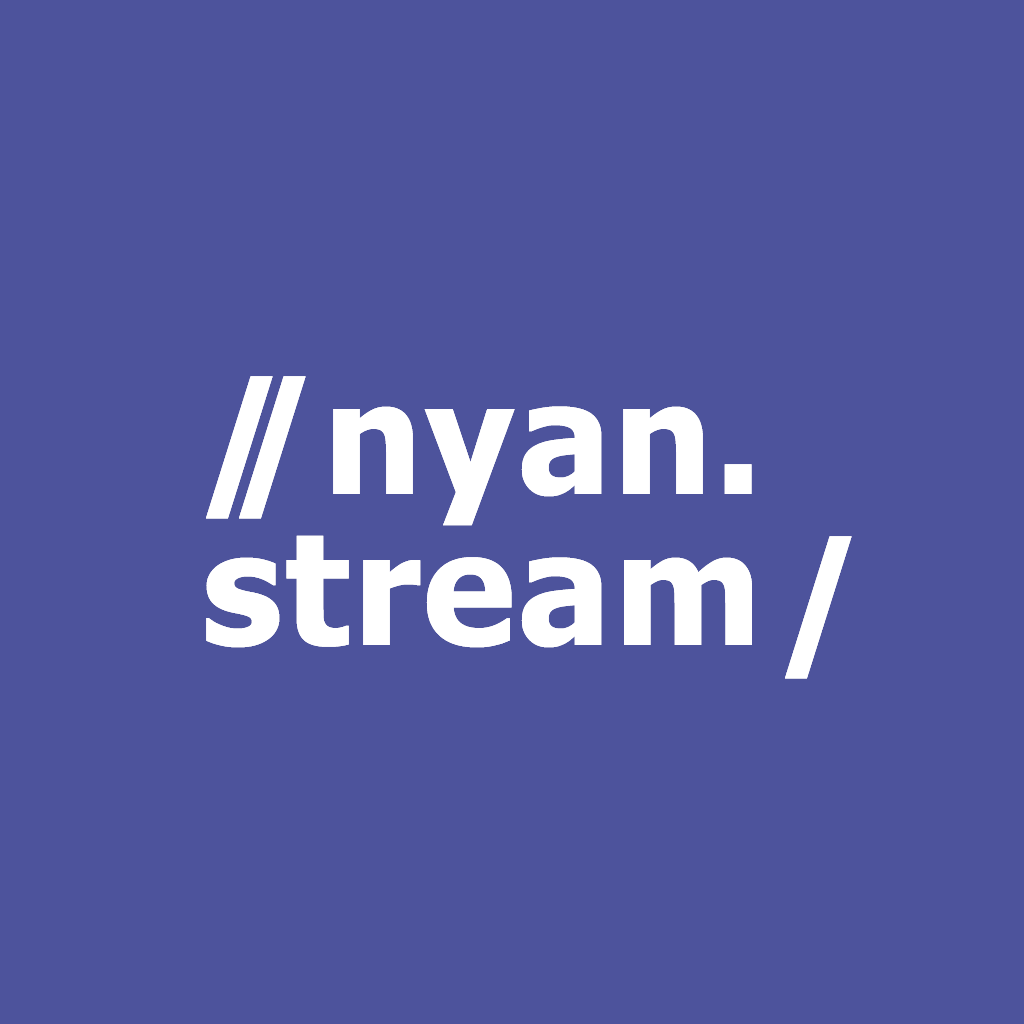
<style>
.page{position:relative;width:1024px;height:1024px;background:#4d539c}
.page>*{position:absolute;margin:0}
.t1{font:155px "Tahoma-Bold";letter-spacing:0.02em;color:#ffffff}
</style>
<div class="page">
<p class="t1" style="left:206px;top:376px;width:67px;height:143px">/</p>
<p class="t1" style="left:239px;top:376px;width:464px;height:150px">/nyan</p>
<p class="t1" style="left:724px;top:464px;width:28px;height:30px">.</p>
<p class="t1" style="left:206px;top:535px;width:546px;height:113px">stream</p>
<p class="t1" style="left:785px;top:536px;width:67px;height:143px">/</p>
</div>
